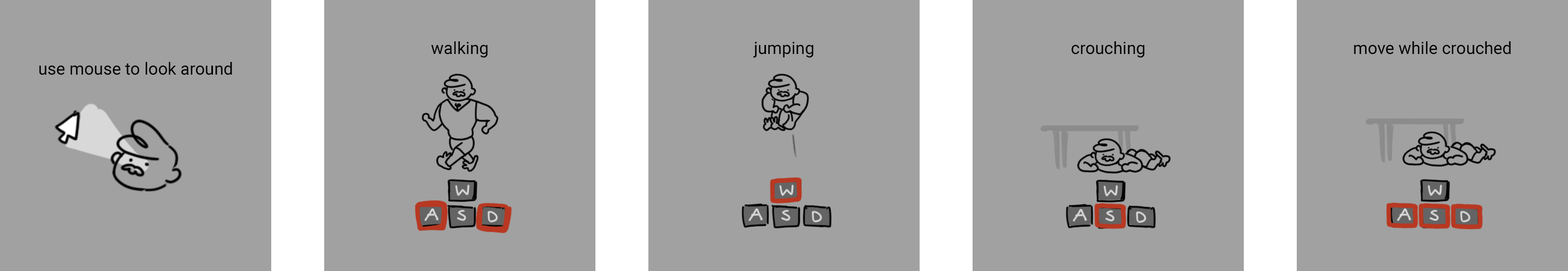
<style>
.page{position:relative;width:1568px;height:271px;background:#a1a1a1}
.page>*{position:absolute;margin:0}
.t1{font:16.9px "Roboto-Regular";color:#000000}
</style>
<div class="page">
<p class="t1" style="left:431px;top:41px;width:57px;height:17px">walking</p>
<p class="t1" style="left:753px;top:42px;width:61px;height:16px">jumping</p>
<p class="t1" style="left:1072px;top:41px;width:73px;height:17px">crouching</p>
<p class="t1" style="left:1354px;top:41px;width:157px;height:14px">move while crouched</p>
<p class="t1" style="left:39px;top:62px;width:193px;height:13px">use mouse to look around</p>
</div>
